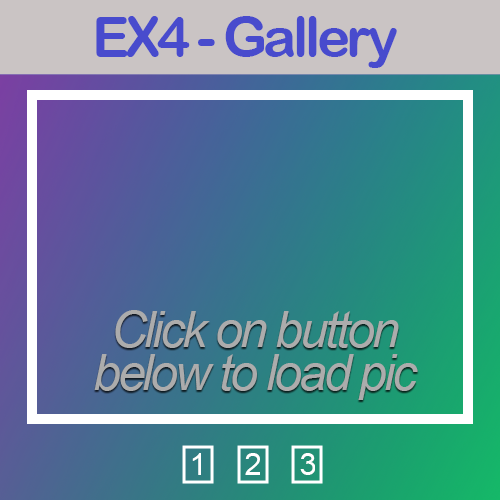
<style>
.page{position:relative;width:500px;height:500px}
.page>*{position:absolute;margin:0}
.t1{font:55.7px "ArialRoundedMTBold";letter-spacing:-0.06em;color:#484bcd}
.t2{font:50px/43px "Arial-ItalicMT";letter-spacing:-0.06em;color:#acacac}
.t3{font:30.6px "ArialMT";letter-spacing:-0.06em;color:#ffffff}
</style>
<div class="page">
<p class="t1" style="left:96px;top:16px;width:301px;height:52px">EX4 - Gallery</p>
<p class="t2" style="left:94px;top:310px;width:324px;height:90px;text-align:center">Click on button<br>below to load pic</p>
<p class="t3" style="left:192px;top:453px;width:9px;height:22px">1</p>
<p class="t3" style="left:245px;top:453px;width:15px;height:22px">2</p>
<p class="t3" style="left:300px;top:453px;width:15px;height:22px">3</p>
</div>
